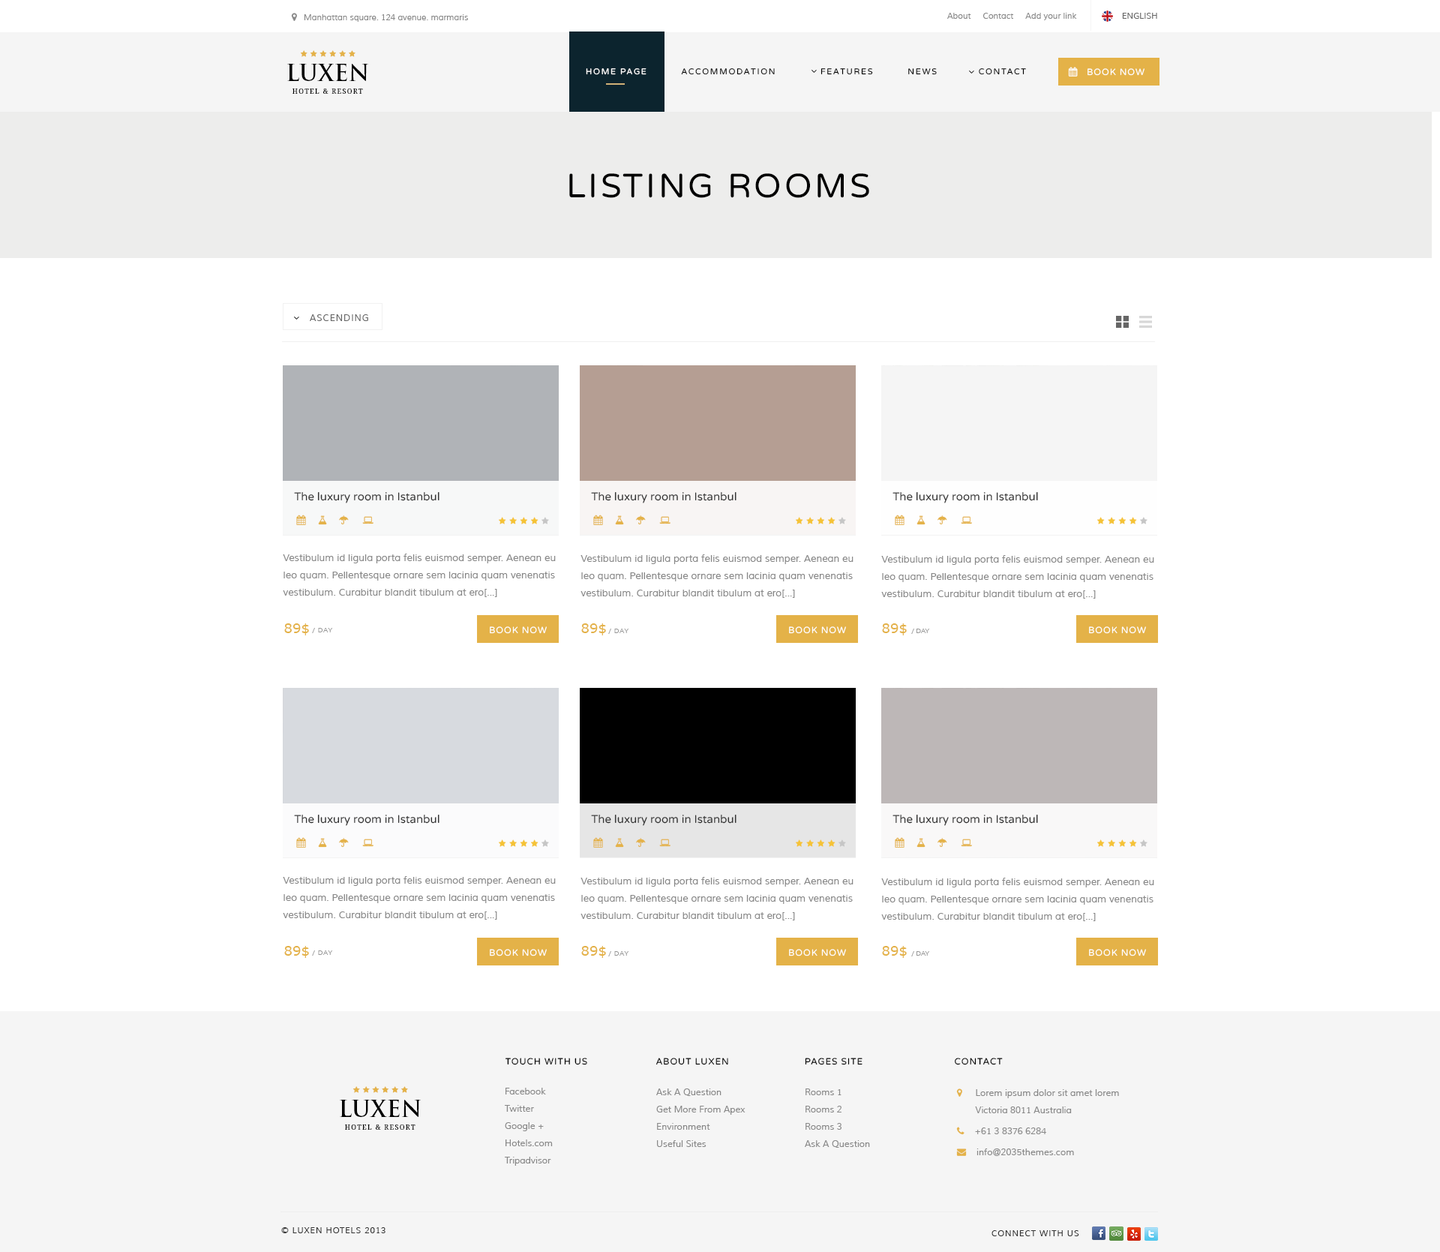
<style>
.page{position:relative;width:1440px;height:1252px;background:#ffffff}
.page>*{position:absolute;margin:0}
.t1{font:8.2px "Muli";color:#888888}
.t2{font:8.2px "Muli";color:#666666}
.t3{font:22.5px "TrajanPro-Bold";color:#000000;text-transform:uppercase}
.t4{font:8.2px "VarelaRound-Regular";letter-spacing:0.15em;color:#000000;text-transform:uppercase}
.t5{font:9px "VarelaRound-Regular";letter-spacing:0.08em;color:#ffffff;text-transform:uppercase}
.t6{font:6.8px "DroidSerif";letter-spacing:0.15em;color:#000000;text-transform:uppercase}
.t7{font:33.8px "VarelaRound-Regular";letter-spacing:0.08em;color:#000000;text-transform:uppercase}
.t8{font:9px "Muli";letter-spacing:0.08em;color:#666666;text-transform:uppercase}
.t9{font:11.2px "VarelaRound-Regular";color:#333333}
.t10{font:9.8px/17.2px "Muli";color:#888888}
.t11{font:13.5px "Verdana";color:#e4b248;text-transform:uppercase}
.t12{font:6.8px "Muli";letter-spacing:0.08em;color:#979797;text-transform:uppercase}
.t13{font:6.8px "Muli";color:#979797;text-transform:uppercase}
.t14{font:9px "VarelaRound-Regular";letter-spacing:0.08em;color:#000000;text-transform:uppercase}
.t15{font:9px/17.2px "Muli";color:#888888}
.t16{font:8.2px "Muli";letter-spacing:0.08em;color:#333333;text-transform:uppercase}
</style>
<div class="page">
<p class="t1" style="left:304px;top:14px;width:164px;height:8px">Manhattan square. 124 avenue. marmaris</p>
<p class="t1" style="left:946px;top:13px;width:131px;height:7px">About     Contact     Add your link</p>
<p class="t2" style="left:1122px;top:13px;width:35px;height:6px">ENGLISH</p>
<p class="t3" style="left:287px;top:64px;width:81px;height:17px">Luxen</p>
<p class="t4" style="left:586px;top:68px;width:440px;height:7px">HOME PAGE          ACCOMMODATION             FEATUREs          NEWS            CONTACT</p>
<p class="t5" style="left:1088px;top:68px;width:56px;height:8px">book now</p>
<p class="t6" style="left:292px;top:88px;width:71px;height:6px">Hotel &amp; Resort</p>
<p class="t7" style="left:569px;top:173px;width:300px;height:25px">listing rooms</p>
<p class="t8" style="left:310px;top:314px;width:58px;height:7px">Ascending</p>
<p class="t9" style="left:294px;top:492px;width:146px;height:11px">The luxury room in Istanbul</p>
<p class="t9" style="left:591px;top:492px;width:145px;height:11px">The luxury room in Istanbul</p>
<p class="t9" style="left:892px;top:492px;width:146px;height:11px">The luxury room in Istanbul</p>
<p class="t10" style="left:283px;top:554px;width:273px;height:43px">Vestibulum id ligula porta felis euismod semper. Aenean eu leo quam. Pellentesque ornare sem lacinia quam venenatis vestibulum. Curabitur blandit tibulum at ero[...]</p>
<p class="t10" style="left:580px;top:554px;width:274px;height:44px">Vestibulum id ligula porta felis euismod semper. Aenean eu leo quam. Pellentesque ornare sem lacinia quam venenatis vestibulum. Curabitur blandit tibulum at ero[...]</p>
<p class="t10" style="left:881px;top:555px;width:273px;height:43px">Vestibulum id ligula porta felis euismod semper. Aenean eu leo quam. Pellentesque ornare sem lacinia quam venenatis vestibulum. Curabitur blandit tibulum at ero[...]</p>
<p class="t11" style="left:284px;top:623px;width:25px;height:12px">89$</p>
<p class="t12" style="left:312px;top:628px;width:21px;height:5px">/ Day</p>
<p class="t5" style="left:490px;top:626px;width:57px;height:8px">book now</p>
<p class="t11" style="left:581px;top:623px;width:25px;height:12px">89$</p>
<p class="t12" style="left:608px;top:628px;width:21px;height:6px">/ Day</p>
<p class="t5" style="left:789px;top:626px;width:57px;height:8px">book now</p>
<p class="t11" style="left:882px;top:623px;width:25px;height:12px">89$</p>
<p class="t13" style="left:911px;top:628px;width:19px;height:6px">/ Day</p>
<p class="t5" style="left:1089px;top:626px;width:57px;height:8px">book now</p>
<p class="t9" style="left:294px;top:814px;width:146px;height:12px">The luxury room in Istanbul</p>
<p class="t9" style="left:591px;top:814px;width:145px;height:12px">The luxury room in Istanbul</p>
<p class="t9" style="left:892px;top:814px;width:146px;height:12px">The luxury room in Istanbul</p>
<p class="t10" style="left:283px;top:876px;width:273px;height:44px">Vestibulum id ligula porta felis euismod semper. Aenean eu leo quam. Pellentesque ornare sem lacinia quam venenatis vestibulum. Curabitur blandit tibulum at ero[...]</p>
<p class="t10" style="left:580px;top:877px;width:274px;height:43px">Vestibulum id ligula porta felis euismod semper. Aenean eu leo quam. Pellentesque ornare sem lacinia quam venenatis vestibulum. Curabitur blandit tibulum at ero[...]</p>
<p class="t10" style="left:881px;top:878px;width:273px;height:43px">Vestibulum id ligula porta felis euismod semper. Aenean eu leo quam. Pellentesque ornare sem lacinia quam venenatis vestibulum. Curabitur blandit tibulum at ero[...]</p>
<p class="t11" style="left:284px;top:946px;width:25px;height:12px">89$</p>
<p class="t12" style="left:312px;top:950px;width:21px;height:6px">/ Day</p>
<p class="t5" style="left:490px;top:949px;width:57px;height:7px">book now</p>
<p class="t11" style="left:581px;top:946px;width:25px;height:12px">89$</p>
<p class="t12" style="left:608px;top:951px;width:21px;height:5px">/ Day</p>
<p class="t5" style="left:789px;top:949px;width:57px;height:7px">book now</p>
<p class="t11" style="left:882px;top:946px;width:25px;height:12px">89$</p>
<p class="t13" style="left:911px;top:951px;width:19px;height:5px">/ Day</p>
<p class="t5" style="left:1089px;top:949px;width:57px;height:7px">book now</p>
<p class="t14" style="left:505px;top:1058px;width:82px;height:7px">touch with us</p>
<p class="t14" style="left:656px;top:1058px;width:72px;height:7px">About Luxen</p>
<p class="t14" style="left:805px;top:1058px;width:57px;height:7px">Pages site</p>
<p class="t14" style="left:955px;top:1058px;width:48px;height:7px">Contact</p>
<p class="t15" style="left:505px;top:1088px;width:48px;height:78px">Facebook<br>Twitter<br>Google +<br>Hotels.com<br>Tripadvisor</p>
<p class="t15" style="left:656px;top:1088px;width:90px;height:59px">Ask A Question<br>Get More From Apex<br>Environment<br>Useful Sites</p>
<p class="t15" style="left:805px;top:1088px;width:65px;height:60px">Rooms 1<br>Rooms 2<br>Rooms 3<br>Ask A Question<br>Get More From Apex<br>Environment<br>Useful Sites</p>
<p class="t3" style="left:340px;top:1100px;width:81px;height:17px">Luxen</p>
<p class="t6" style="left:345px;top:1124px;width:71px;height:6px">Hotel &amp; Resort</p>
<p class="t16" style="left:281px;top:1227px;width:105px;height:6px">© Luxen Hotels 2013</p>
<p class="t16" style="left:992px;top:1230px;width:87px;height:6px">Connect with us</p>
</div>
